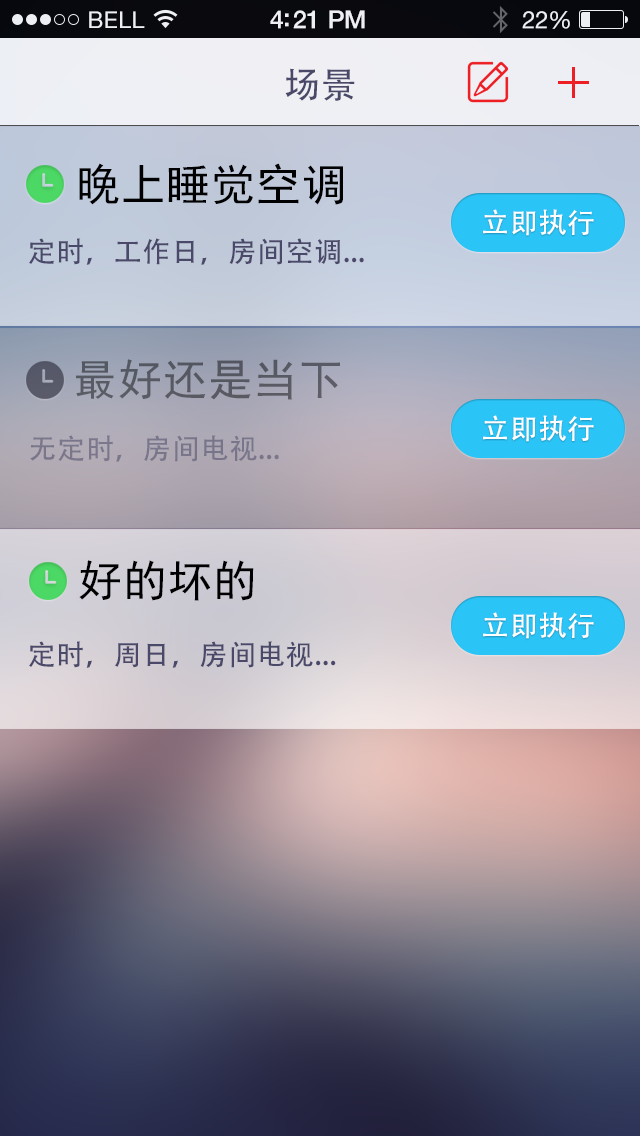
<style>
.page{position:relative;width:640px;height:1136px}
.page>*{position:absolute;margin:0}
.t1{font:23px "HelveticaNeue";letter-spacing:0.02em;color:#ffffff}
.t2{font:25px "HelveticaNeue-Medium";letter-spacing:-0.02em;color:#ffffff}
.t3{font:24px "HelveticaNeue";letter-spacing:-0.02em;color:#ffffff}
.t4{font:36px "AdobeHeitiStd-Regular";letter-spacing:0.025em;color:#4b4969}
.t5{font:44px "SimHei";letter-spacing:0.025em;color:#000000}
.t6{font:28px "AdobeHeitiStd-Regular";letter-spacing:0.025em;color:#ffffff}
.t7{font:28px "AdobeHeitiStd-Regular";letter-spacing:0.025em;color:#4b4969}
.t8{font:44px "SimHei";letter-spacing:0.025em;color:#575963}
.t9{font:28px "AdobeHeitiStd-Regular";letter-spacing:0.025em;color:#79768a}
</style>
<div class="page">
<p class="t1" style="left:89px;top:11px;width:56px;height:17px">BELL</p>
<p class="t2" style="left:270px;top:10px;width:95px;height:19px">4:21 PM</p>
<p class="t3" style="left:522px;top:11px;width:48px;height:18px">22%</p>
<p class="t4" style="left:285px;top:68px;width:70px;height:33px">场景</p>
<p class="t5" style="left:79px;top:163px;width:264px;height:42px">晚上睡觉空调</p>
<p class="t6" style="left:483px;top:209px;width:111px;height:27px">立即执行</p>
<p class="t7" style="left:29px;top:238px;width:335px;height:27px">定时，工作日，房间空调...</p>
<p class="t8" style="left:76px;top:359px;width:264px;height:41px">最好还是当下</p>
<p class="t6" style="left:483px;top:415px;width:111px;height:27px">立即执行</p>
<p class="t9" style="left:30px;top:435px;width:249px;height:27px">无定时，房间电视...</p>
<p class="t5" style="left:79px;top:560px;width:175px;height:41px">好的坏的</p>
<p class="t6" style="left:483px;top:612px;width:111px;height:27px">立即执行</p>
<p class="t7" style="left:29px;top:641px;width:307px;height:27px">定时，周日，房间电视...</p>
</div>
